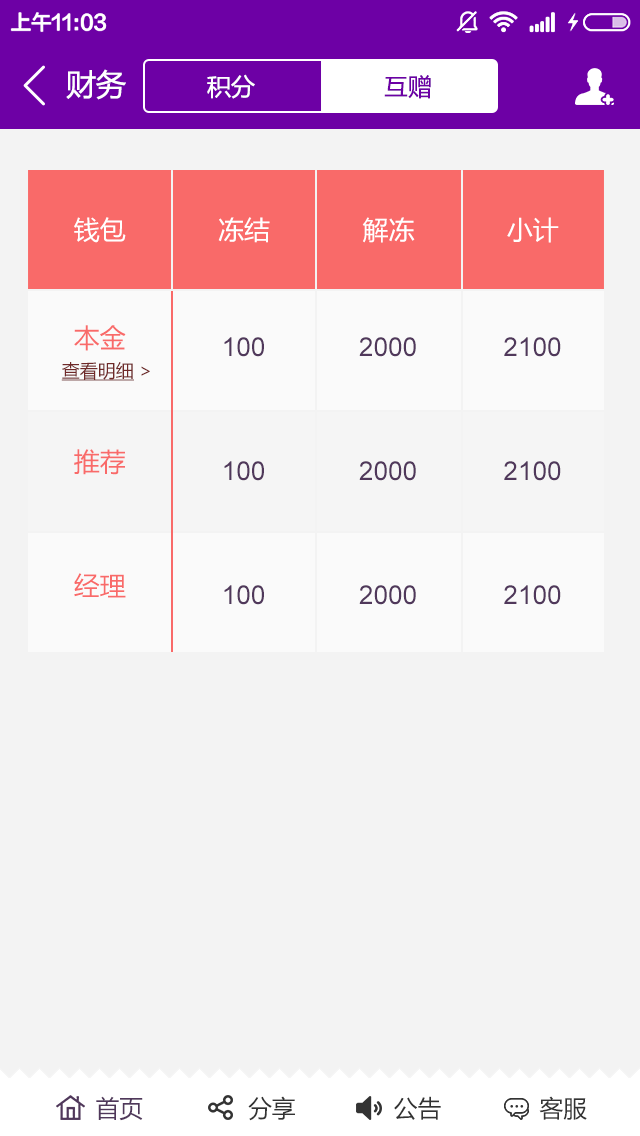
<style>
.page{position:relative;width:640px;height:1136px;background:#f3f3f3}
.page>*{position:absolute;margin:0}
.t1{font:30px "MicrosoftYaHei";color:#ffffff}
.t2{font:24px "MicrosoftYaHei";color:#ffffff}
.t3{font:24px "MicrosoftYaHei";color:#6d00a5}
.t4{font:26px "MicrosoftYaHei";color:#ffffff}
.t5{font:26px/62px "MicrosoftYaHei";color:#f96a69}
.t6{font:26px/62px "ArialMT";color:#50385b}
.t7{font:18px "MicrosoftYaHei";color:#6f2928;text-decoration:underline}
.t8{font:18px "MicrosoftYaHei";color:#6f2928}
.t9{font:24px "MicrosoftYaHei";color:#333333}
.t10{font:24px "MicrosoftYaHei";color:#50385b}
</style>
<div class="page">
<p class="t1" style="left:66px;top:69px;width:60px;height:31px">财务</p>
<p class="t2" style="left:207px;top:74px;width:48px;height:25px">积分</p>
<p class="t3" style="left:384px;top:75px;width:47px;height:24px">互赠</p>
<p class="t4" style="left:74px;top:217px;width:485px;height:26px">钱包            冻结            解冻            小计</p>
<p class="t5" style="left:74px;top:325px;width:52px;height:273px">本金<br><br>推荐<br><br>经理</p>
<p class="t6" style="left:224px;top:337px;width:337px;height:268px">100             2000            2100<br><br>100             2000            2100<br><br>100             2000            2100</p>
<p class="t7" style="left:61px;top:362px;width:89px;height:19px">查看明细<span class="t8"> &gt;</span></p>
<p class="t9" style="left:96px;top:1096px;width:491px;height:25px"><span class="t10">首页</span>               分享              公告              客服</p>
</div>
